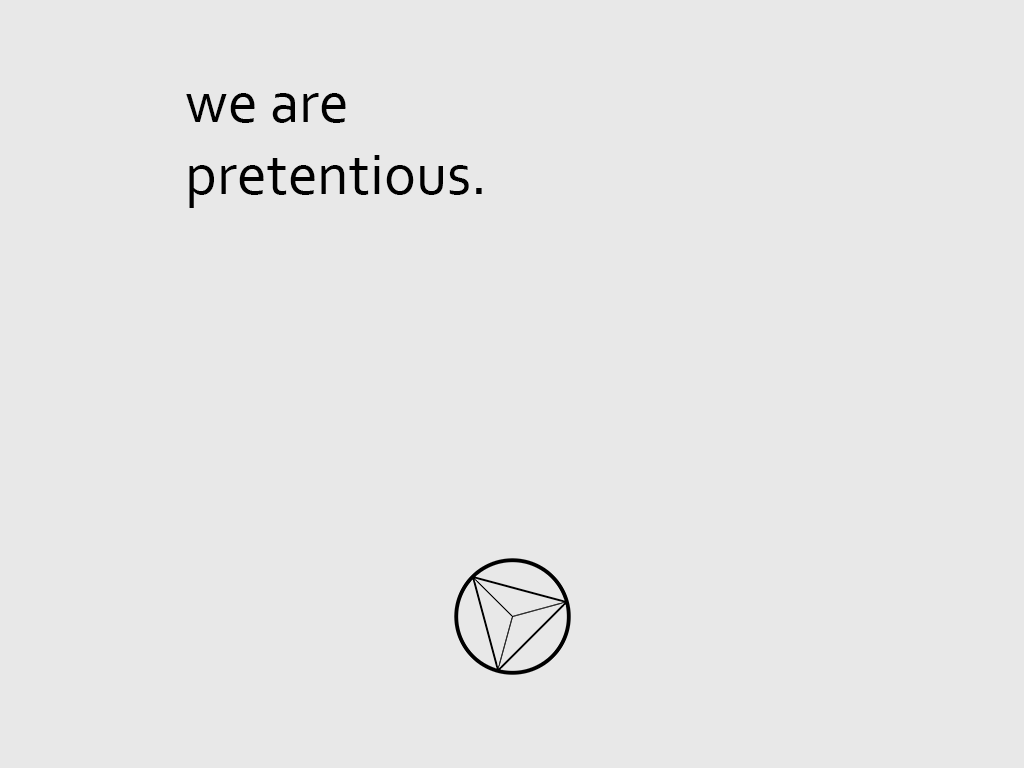
<style>
.page{position:relative;width:1024px;height:768px;background:#e8e8e8}
.page>*{position:absolute;margin:0}
.t1{font:60px "Corbel";color:#000000}
</style>
<div class="page">
<p class="t1" style="left:186px;top:93px;width:296px;height:115px">we are <br>pretentious.</p>
</div>
